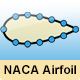
<style>
.page{position:relative;width:80px;height:80px}
.page>*{position:absolute;margin:0}
.t1{font:12px "Arial-BoldMT";color:#000000}
</style>
<div class="page">
<p class="t1" style="left:4px;top:65px;width:72px;height:9px">NACA Airfoil</p>
</div>
